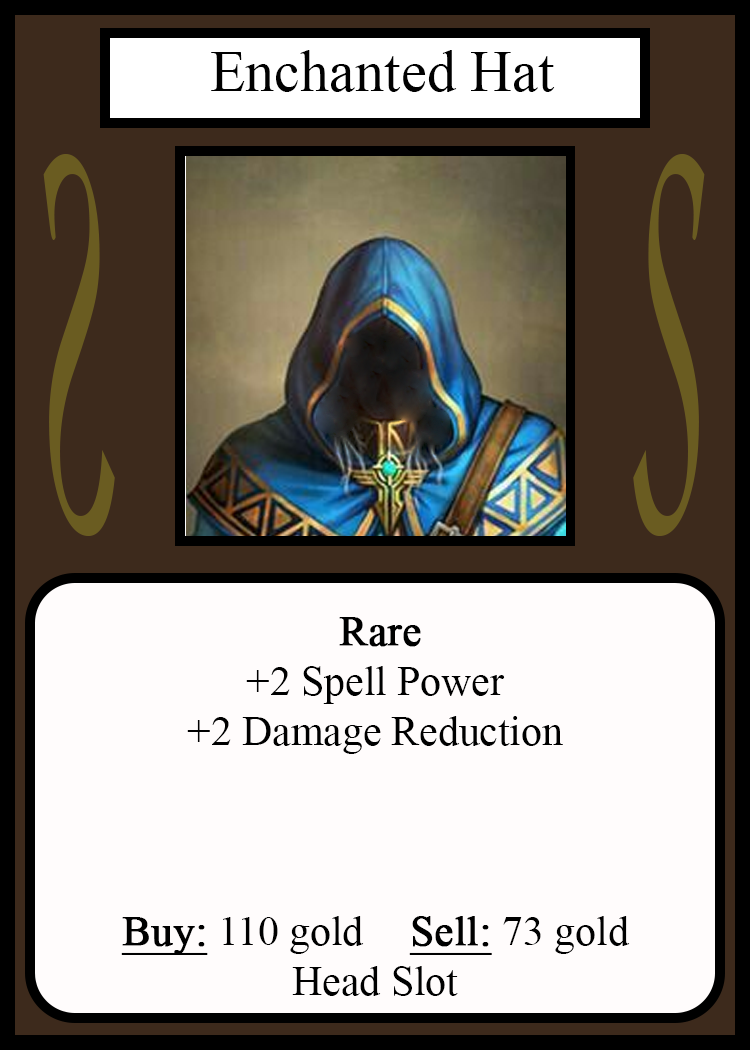
<style>
.page{position:relative;width:750px;height:1050px;background:#fffcfc}
.page>*{position:absolute;margin:0}
.t1{font:58.3px "TimesNewRomanPSMT";color:#010101}
.t2{font:548.5px "Apple-Chancery";color:#6a5c21;scale:0.27 1}
.t3{font:548.2px "Apple-Chancery";color:#6a5c21;scale:0.27 1}
.t4{font:41.7px "TimesNewRomanPSMT";color:#000000}
.t5{font:41.7px "TimesNewRomanPSMT";color:#000000;font-weight:bold}
.t6{font:41.7px "TimesNewRomanPSMT";color:#000000;font-weight:bold;text-decoration:underline}
</style>
<div class="page">
<p class="t1" style="left:211px;top:50px;width:344px;height:42px">Enchanted Hat</p>
<p class="t2" style="left:43px;top:154px;width:72px;height:382px;rotate:180deg">S</p>
<p class="t3" style="left:633px;top:154px;width:72px;height:382px">S</p>
<p class="t4" style="left:121px;top:617px;width:509px;height:379px;text-align:center"><span class="t5">Rare</span><br>+2 Spell Power<br>+2 Damage Reduction<br><br><br><br><span class="t6">Buy:</span> 110 gold   <span class="t6">Sell:</span> 73 gold<br>Head Slot</p>
</div>
